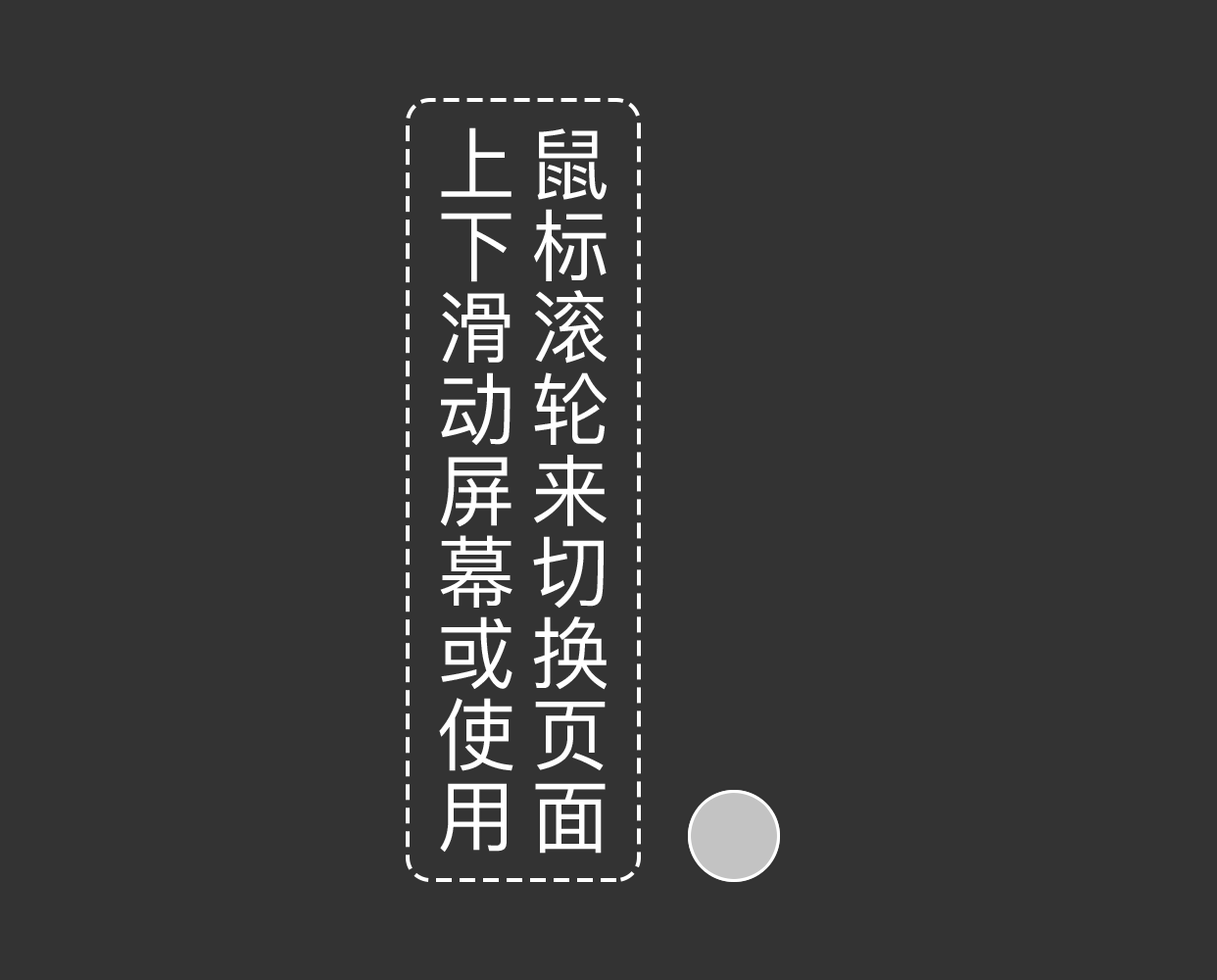
<style>
.page{position:relative;width:1217px;height:980px;background:#333333}
.page>*{position:absolute;margin:0}
.t1{font:78.4px "PingFang-SC-Medium";letter-spacing:0.04em;color:#ffffff;text-transform:uppercase}
</style>
<div class="page">
<p class="t1" style="left:439px;top:127px;width:169px;height:726px;text-align:center">鼠标滚轮来切换页面<br>上下滑动屏幕或使用</p>
</div>
